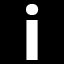
<style>
.page{position:relative;width:64px;height:64px;background:#000000}
.page>*{position:absolute;margin:0}
.t1{font:76px "Roboto-Bold";color:#ffffff}
</style>
<div class="page">
<p class="t1" style="left:26px;top:4px;width:13px;height:56px">i</p>
</div>
